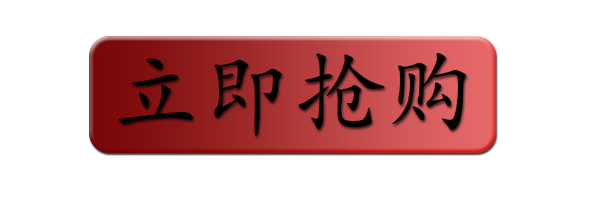
<style>
.page{position:relative;width:600px;height:200px;background:#ffffff}
.page>*{position:absolute;margin:0}
.t1{font:92px "AdobeKaitiStd-Regular";color:#000000}
</style>
<div class="page">
<p class="t1" style="left:118px;top:53px;width:348px;height:83px">立即抢购</p>
</div>
